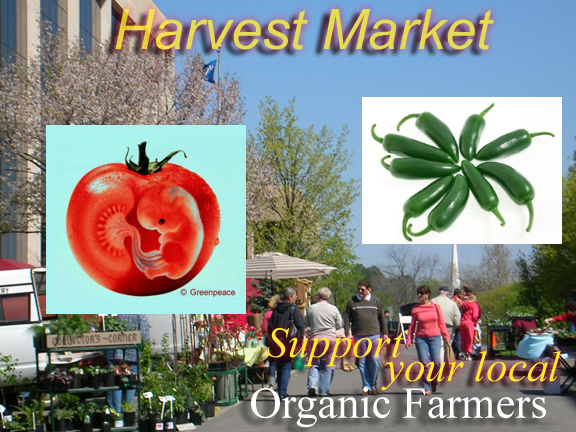
<style>
.page{position:relative;width:576px;height:432px}
.page>*{position:absolute;margin:0}
.t1{font:55.8px "Arial-ItalicMT";color:#e4dc51}
.t2{font:43px/23.2px "TimesNewRomanPS-ItalicMT";color:#ffe92e}
.t3{font:43px "TimesNewRomanPS-ItalicMT";color:#ffe92e}
.t4{font:44.2px "TimesNewRomanPSMT";color:#ffffff}
</style>
<div class="page">
<p class="t1" style="left:115px;top:9px;width:379px;height:41px">Harvest Market</p>
<p class="t2" style="left:266px;top:328px;width:295px;height:63px"><span class="t3">Support <br></span>           your local</p>
<p class="t4" style="left:251px;top:387px;width:295px;height:41px">Organic Farmers</p>
</div>
